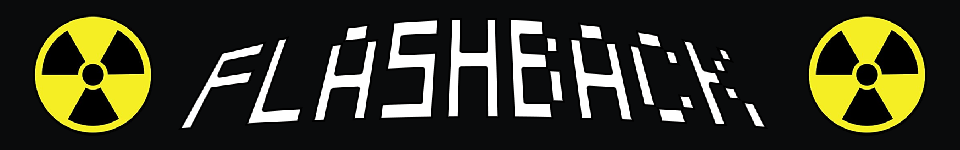
<style>
.page{position:relative;width:960px;height:150px;background:#0a0b0c}
.page>*{position:absolute;margin:0}
.t1{font:64.6px "Pixeled";color:#ffffff}
</style>
<div class="page">
<p class="t1" style="left:178px;top:18px;width:590px;height:112px">FLASHBACK</p>
</div>
